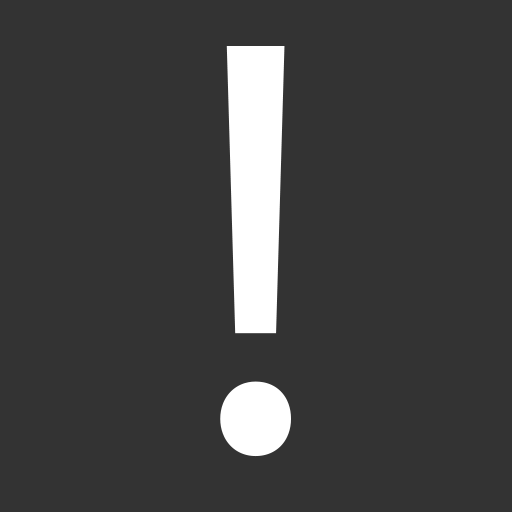
<style>
.page{position:relative;width:512px;height:512px;background:#333333}
.page>*{position:absolute;margin:0}
.t1{font:600px "MyriadPro-Regular";color:#ffffff}
</style>
<div class="page">
<p class="t1" style="left:220px;top:46px;width:71px;height:411px">!</p>
</div>
